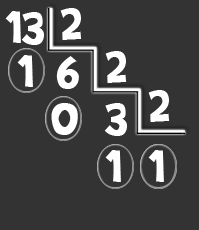
<style>
.page{position:relative;width:199px;height:230px;background:#333333}
.page>*{position:absolute;margin:0}
.t1{font:53.3px "BradyBunchRemastered";color:#ffffff}
</style>
<div class="page">
<p class="t1" style="left:5px;top:11px;width:39px;height:34px">13</p>
<p class="t1" style="left:60px;top:8px;width:22px;height:32px">2</p>
<p class="t1" style="left:105px;top:51px;width:22px;height:32px">2</p>
<p class="t1" style="left:17px;top:55px;width:16px;height:32px">1</p>
<p class="t1" style="left:56px;top:56px;width:23px;height:33px">6</p>
<p class="t1" style="left:148px;top:90px;width:22px;height:32px">2</p>
<p class="t1" style="left:51px;top:103px;width:27px;height:32px">0</p>
<p class="t1" style="left:104px;top:103px;width:23px;height:33px">3</p>
<p class="t1" style="left:105px;top:150px;width:16px;height:32px">1</p>
<p class="t1" style="left:148px;top:150px;width:16px;height:32px">1</p>
</div>
